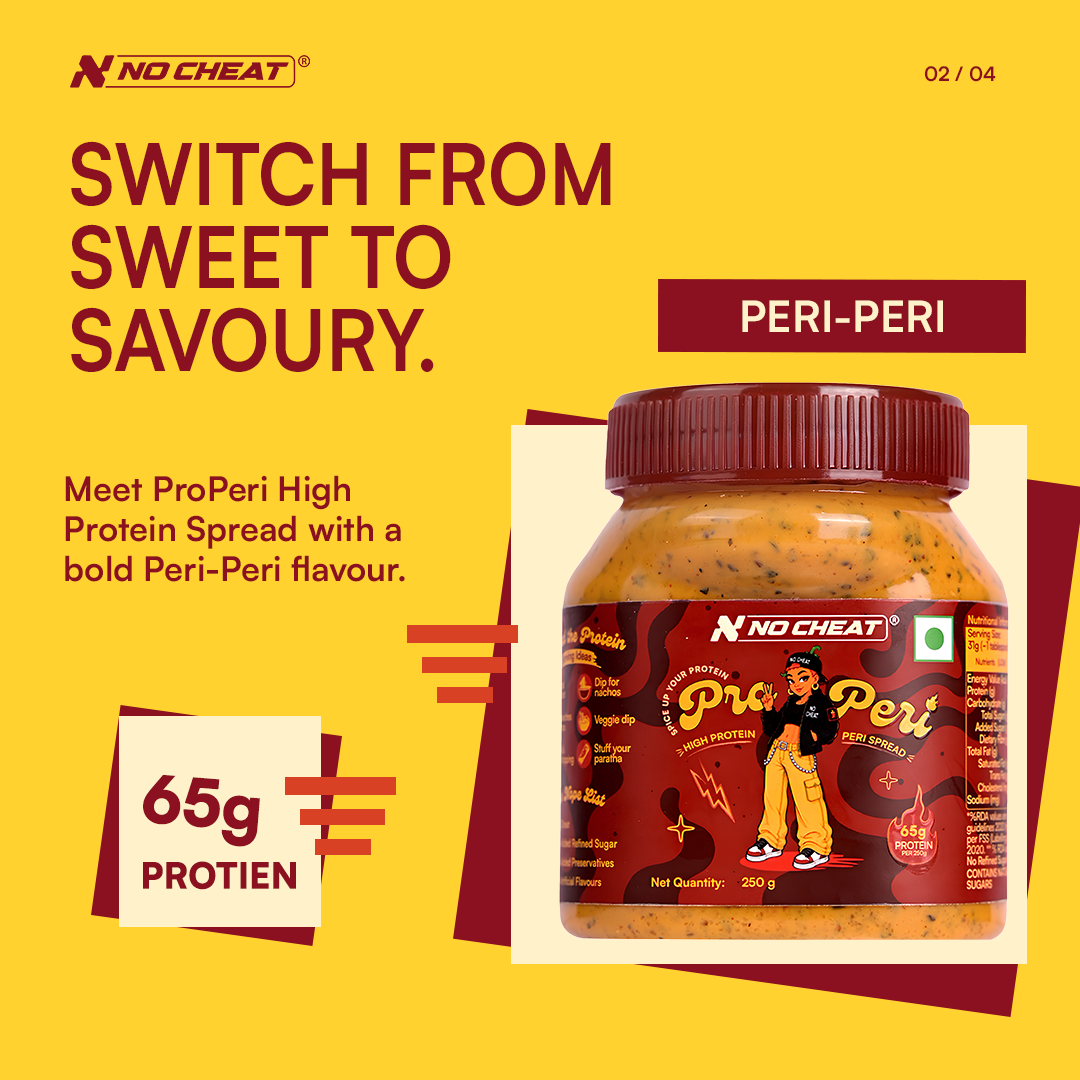
<style>
.page{position:relative;width:1080px;height:1080px;background:#ffd22f}
.page>*{position:absolute;margin:0}
.t1{font:20px "Satoshi-Bold";color:#8b1020}
.t2{font:84.9px/82.9px "Satoshi-Bold";color:#8b1020;scale:0.9 1}
.t3{font:43px "Satoshi-Bold";color:#fff1ca}
.t4{font:34px/40px "Satoshi-Bold";color:#8b1020}
.t5{font:65.4px "Satoshi-Black";color:#8b1020}
.t6{font:36px "Satoshi-Black";color:#8b1020}
</style>
<div class="page">
<p class="t1" style="left:924px;top:66px;width:72px;height:16px">02 / 04</p>
<p class="t2" style="left:71px;top:141px;width:540px;height:231px">SWITCH FROM<br>SWEET TO<br>SAVOURY.</p>
<p class="t3" style="left:742px;top:300px;width:201px;height:32px">PERI-PERI</p>
<p class="t4" style="left:65px;top:475px;width:340px;height:107px">Meet ProPeri High<br>Protein Spread with a<br>bold Peri-Peri flavour.</p>
<p class="t5" style="left:143px;top:774px;width:117px;height:73px;rotate:5deg">65g</p>
<p class="t6" style="left:143px;top:861px;width:153px;height:29px">PROTIEN</p>
</div>
